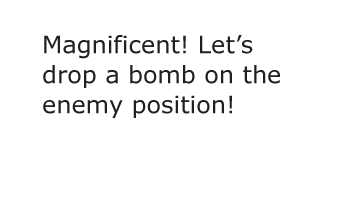
<style>
.page{position:relative;width:340px;height:222px;background:#ffffff}
.page>*{position:absolute;margin:0}
.t1{font:24px/30px "Verdana";color:#202020}
</style>
<div class="page">
<p class="t1" style="left:43px;top:35px;width:237px;height:83px">Magnificent! Let’s drop a bomb on the enemy position!</p>
</div>
